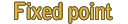
<style>
.page{position:relative;width:128px;height:24px;background:#ffffff}
.page>*{position:absolute;margin:0}
.t1{font:22px "BellGothicStd-Bold";letter-spacing:-0.025em;color:#e5b743}
</style>
<div class="page">
<p class="t1" style="left:15px;top:2px;width:97px;height:21px">Fixed point</p>
</div>
